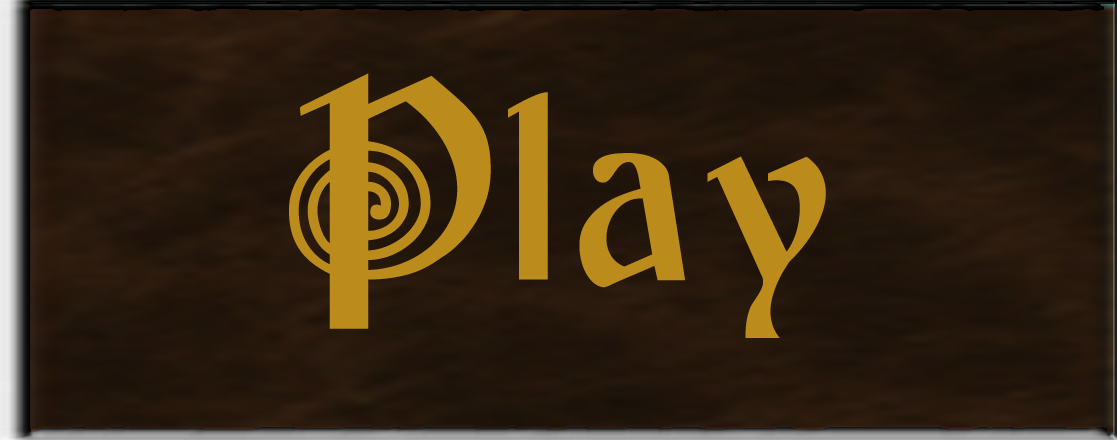
<style>
.page{position:relative;width:1120px;height:440px}
.page>*{position:absolute;margin:0}
.t1{font:256.5px "akaPotsley";letter-spacing:0.03em;color:#bb8c1c;scale:1.03 1}
</style>
<div class="page">
<p class="t1" style="left:289px;top:73px;width:537px;height:265px">Play</p>
</div>
